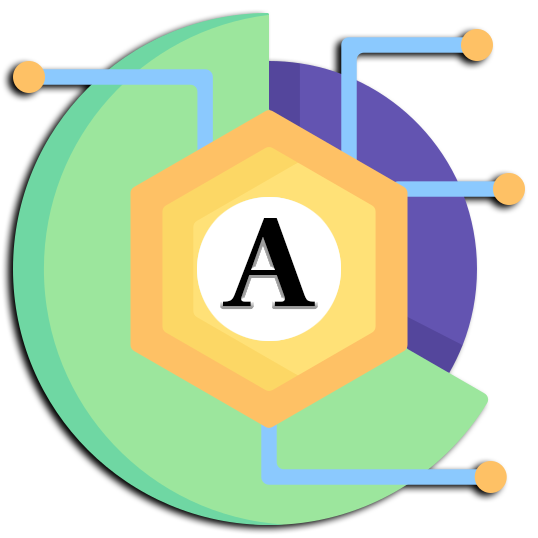
<style>
.page{position:relative;width:538px;height:538px;background:#ffffff}
.page>*{position:absolute;margin:0}
.t1{font:133.3px "FrankRuhlHofshi-Bold";letter-spacing:-0.05em;color:#000000}
</style>
<div class="page">
<p class="t1" style="left:223px;top:218px;width:92px;height:89px">A</p>
</div>
